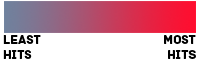
<style>
.page{position:relative;width:200px;height:60px;background:#ffffff}
.page>*{position:absolute;margin:0}
.t1{font:12.5px "Archive";color:#000000}
</style>
<div class="page">
<p class="t1" style="left:3px;top:35px;width:38px;height:24px">Least<br>Hits</p>
<p class="t1" style="left:164px;top:35px;width:32px;height:24px;text-align:right">Most<br>Hits</p>
</div>
